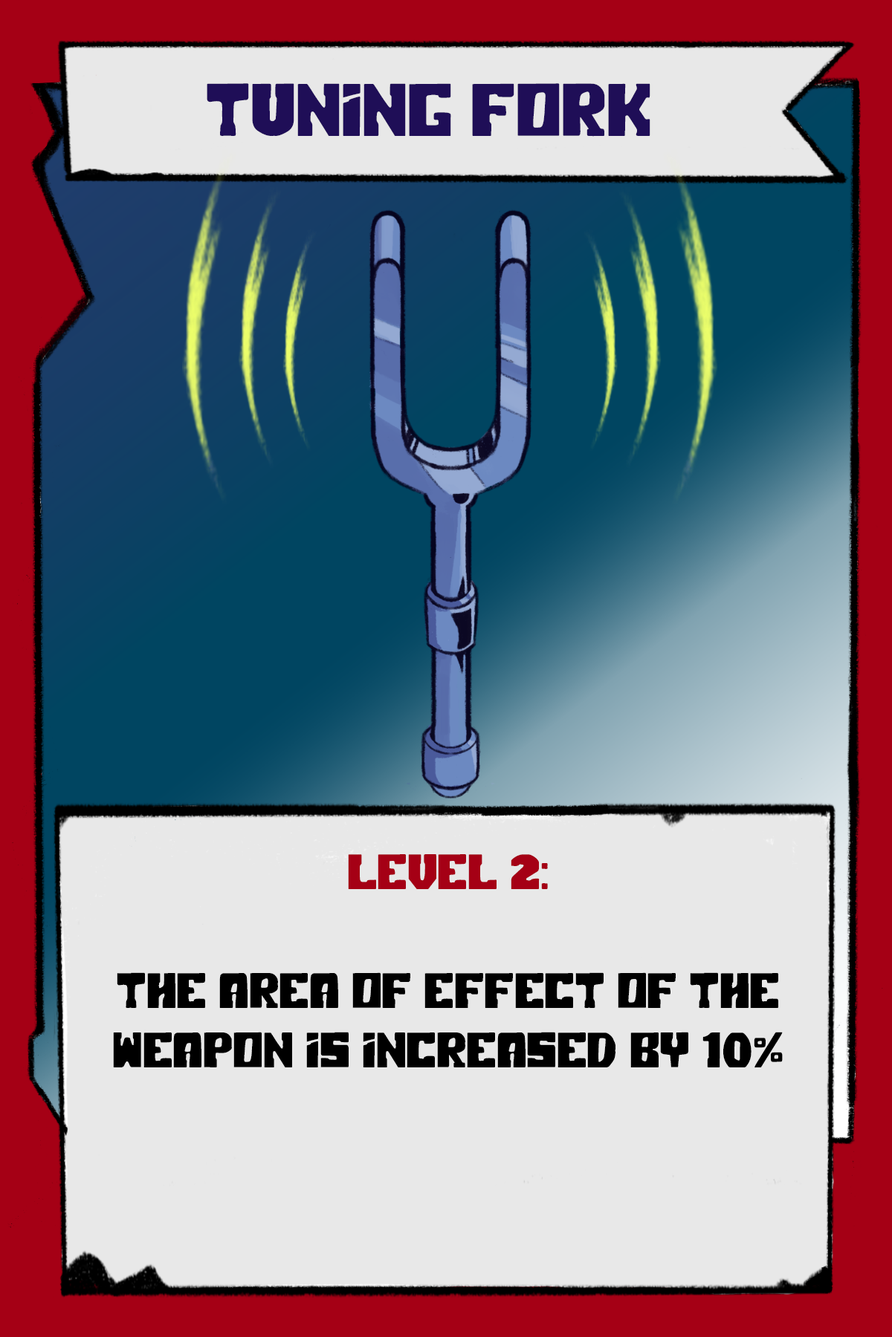
<style>
.page{position:relative;width:892px;height:1337px;background:#e8e8e8}
.page>*{position:absolute;margin:0}
.t1{font:74.3px "PolarPress";color:#1f0e57}
.t2{font:49.5px "PolarPress";color:#000000}
.t3{font:49.5px "PolarPress";color:#a50015}
</style>
<div class="page">
<p class="t1" style="left:207px;top:83px;width:443px;height:54px">TUNING FORK</p>
<p class="t2" style="left:113px;top:854px;width:669px;height:214px;text-align:center"><span class="t3">LEVEL 2:<br><br></span>The Area Of Effect of the weapon is increased by 10%</p>
</div>
